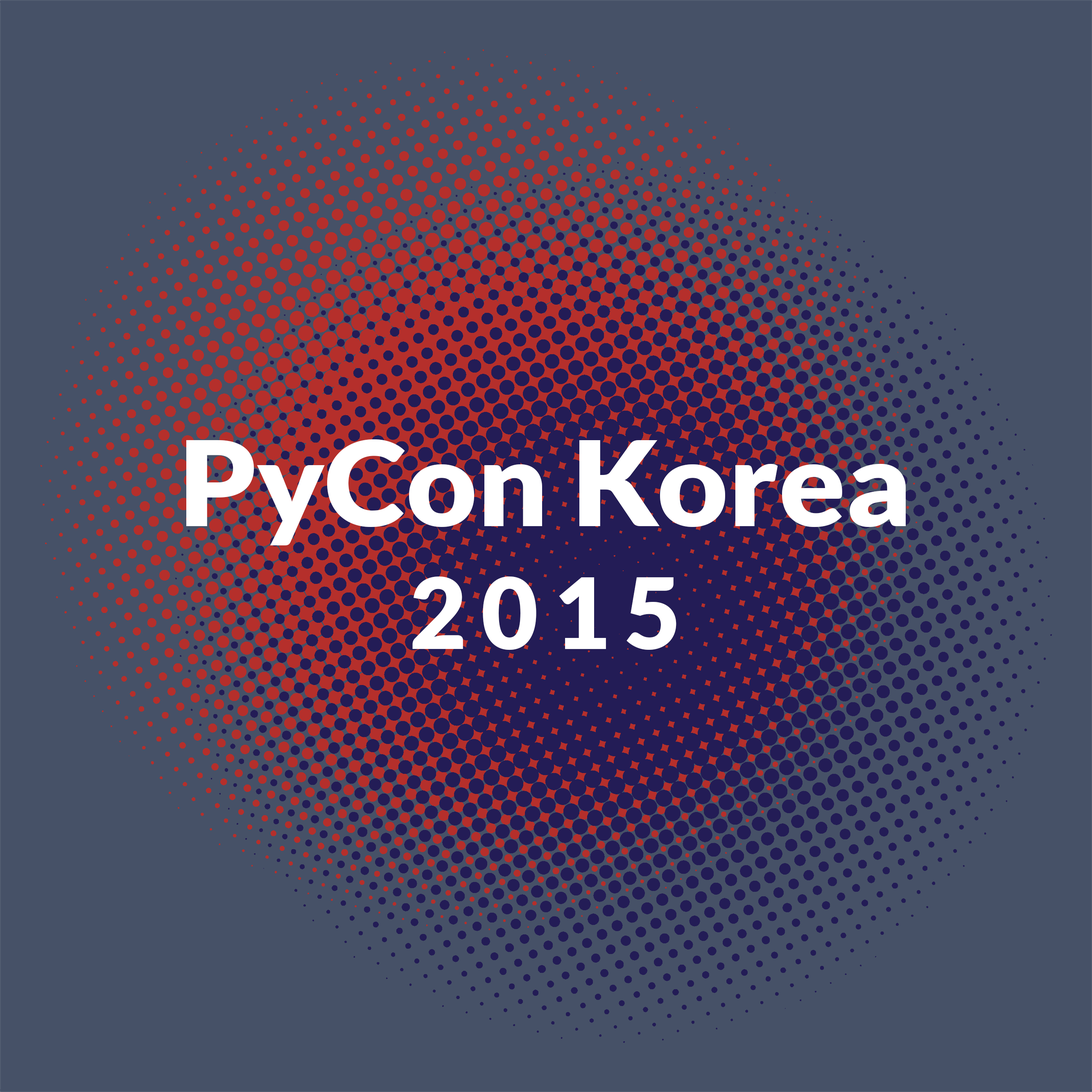
<style>
.page{position:relative;width:1092px;height:1092px;background:#465167}
.page>*{position:absolute;margin:0}
.t1{font:117.9px/147.4px "Lato-Black";color:#ffffff;scale:1.04 1}
.t2{font:98.3px/122.8px "Lato-Black";letter-spacing:0.15em;color:#ffffff}
</style>
<div class="page">
<p class="t1" style="left:186px;top:439px;width:720px;height:211px;text-align:center">PyCon Korea<br><span class="t2">2015</span></p>
</div>
